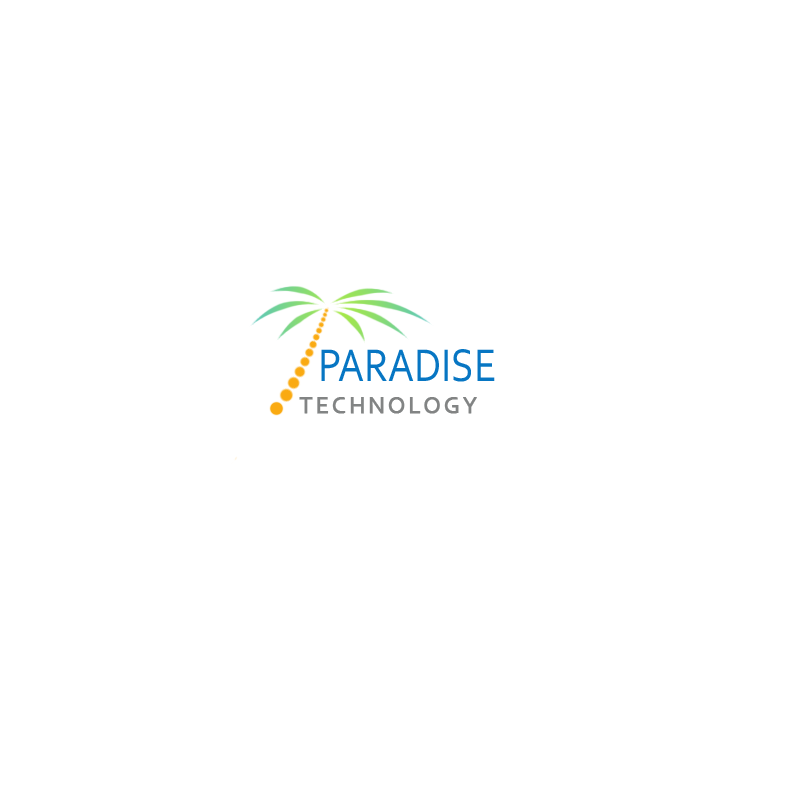
<style>
.page{position:relative;width:800px;height:800px;background:#ffffff}
.page>*{position:absolute;margin:0}
.t1{font:48px "Corbel";color:#0776c3;scale:0.85 1}
.t2{font:24px "Corbel";letter-spacing:0.1em;color:#828484;font-weight:bold}
</style>
<div class="page">
<p class="t1" style="left:321px;top:349px;width:174px;height:33px">PARADISE</p>
<p class="t2" style="left:299px;top:397px;width:178px;height:17px">TECHNOLOGY</p>
</div>
